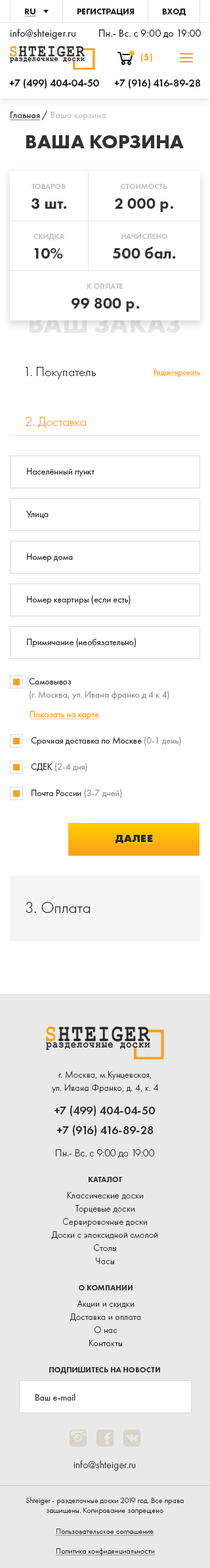
<style>
.page{position:relative;width:210px;height:1568px;background:#ffffff}
.page>*{position:absolute;margin:0}
.t1{font:9.2px "FuturaPT-Book";letter-spacing:0.02em;color:#c4c4c4}
.t2{font:9.2px "FuturaPT-Book";letter-spacing:0.02em;color:#333230;text-decoration:underline}
.t3{font:9.2px "FuturaPT-Book";letter-spacing:0.02em;color:#333230}
.t4{font:19.7px "FuturaPT-Bold";color:#333230;text-transform:uppercase}
.t5{font:7.9px "FuturaPT-Demi";color:#c6c6c5;text-transform:uppercase}
.t6{font:15.8px "FuturaPT-Heavy";color:#333230}
.t7{font:26.3px "FuturaPT-Bold";text-transform:uppercase}
.t8{font:13.1px "FuturaPT-Light";color:#2b2a28}
.t9{font:7.9px "FuturaPT-Book";color:#ff9f1b;text-decoration:underline}
.t10{font:13.1px "FuturaPT-Light";color:#ff9f1b}
.t11{font:9.2px "FuturaPT-Book";color:#333230}
.t12{font:9.2px/13.1px "FuturaPT-Book";color:#979796}
.t13{font:9.2px/13.1px "FuturaPT-Book";color:#333230}
.t14{font:9.2px "FuturaPT-Book";color:#ff9f1b;text-decoration:underline}
.t15{font:9.2px "FuturaPT-Book";color:#979796}
.t16{font:10.5px "FuturaPT-ExtraBold";letter-spacing:0.02em;color:#2b2a28;text-transform:uppercase}
.t17{font:16.4px "FuturaPT-Light";color:#2b2a28}
</style>
<div class="page">
<p class="t1" style="left:10px;top:111px;width:96px;height:10px"><span class="t2">Главная</span><span class="t3"> / </span>Ваша корзина</p>
<p class="t4" style="left:26px;top:135px;width:158px;height:13px">Ваша корзина</p>
<p class="t5" style="left:32px;top:184px;width:34px;height:5px">Товаров</p>
<p class="t5" style="left:121px;top:184px;width:46px;height:5px">Стоимость</p>
<p class="t6" style="left:31px;top:198px;width:36px;height:11px">3 шт.</p>
<p class="t6" style="left:114px;top:198px;width:59px;height:14px">2 000 р.</p>
<p class="t5" style="left:33px;top:234px;width:31px;height:6px">Скидка</p>
<p class="t5" style="left:121px;top:234px;width:46px;height:5px">Начислено</p>
<p class="t6" style="left:34px;top:248px;width:29px;height:11px">10%</p>
<p class="t6" style="left:113px;top:247px;width:63px;height:12px">500 бал.</p>
<p class="t5" style="left:87px;top:284px;width:36px;height:5px">К оплате</p>
<p class="t6" style="left:72px;top:298px;width:68px;height:14px">99 800 р.</p>
<p class="t7" style="left:30px;top:315px;width:150px;height:18px">Ваш заказ</p>
<p class="t8" style="left:26px;top:367px;width:70px;height:12px">1. Покупатель</p>
<p class="t9" style="left:153px;top:370px;width:47px;height:7px">Редактировать</p>
<p class="t10" style="left:25px;top:417px;width:61px;height:11px">2. Доставка</p>
<p class="t11" style="left:27px;top:468px;width:68px;height:9px">Населённый пункт</p>
<p class="t11" style="left:26px;top:511px;width:23px;height:8px">Улица</p>
<p class="t11" style="left:27px;top:553px;width:46px;height:9px">Номер дома</p>
<p class="t11" style="left:27px;top:595px;width:104px;height:9px">Номер квартиры (если есть)</p>
<p class="t11" style="left:27px;top:638px;width:109px;height:9px">Примичание (необязательно)</p>
<p class="t12" style="left:29px;top:678px;width:140px;height:22px"><span class="t13">Самовывоз <br></span>(г. Москва, ул. Ивана франко д 4 к 4)</p>
<p class="t14" style="left:29px;top:711px;width:70px;height:8px">Показать на карте</p>
<p class="t11" style="left:31px;top:736px;width:150px;height:10px">Срочная доставка по Москве <span class="t15">(0-1 день)</span></p>
<p class="t15" style="left:31px;top:763px;width:56px;height:9px"><span class="t11">СДЕК </span>(2-4 дня)</p>
<p class="t11" style="left:32px;top:789px;width:90px;height:9px">Почта России <span class="t15">(3-7 дней)</span></p>
<p class="t16" style="left:115px;top:835px;width:38px;height:8px">Далее</p>
<p class="t17" style="left:26px;top:902px;width:64px;height:11px">3. Оплата</p>
</div>
